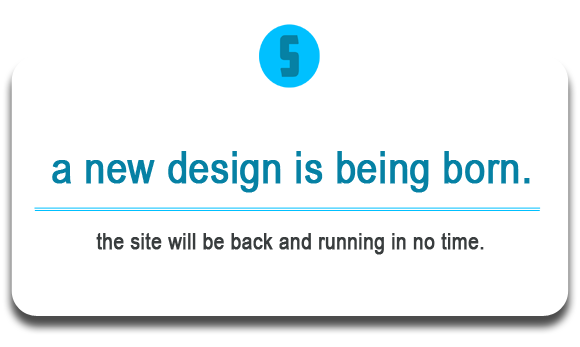
<style>
.page{position:relative;width:580px;height:347px;background:#ffffff}
.page>*{position:absolute;margin:0}
.t1{font:45px "ArialNarrow";color:#0681a4;font-weight:bold}
.t2{font:23px "ArialNarrow";color:#393d3e;font-weight:bold}
</style>
<div class="page">
<p class="t1" style="left:52px;top:151px;width:478px;height:42px">a new design is being born.</p>
<p class="t2" style="left:96px;top:233px;width:388px;height:22px">the site will be back and running in no time.</p>
</div>
